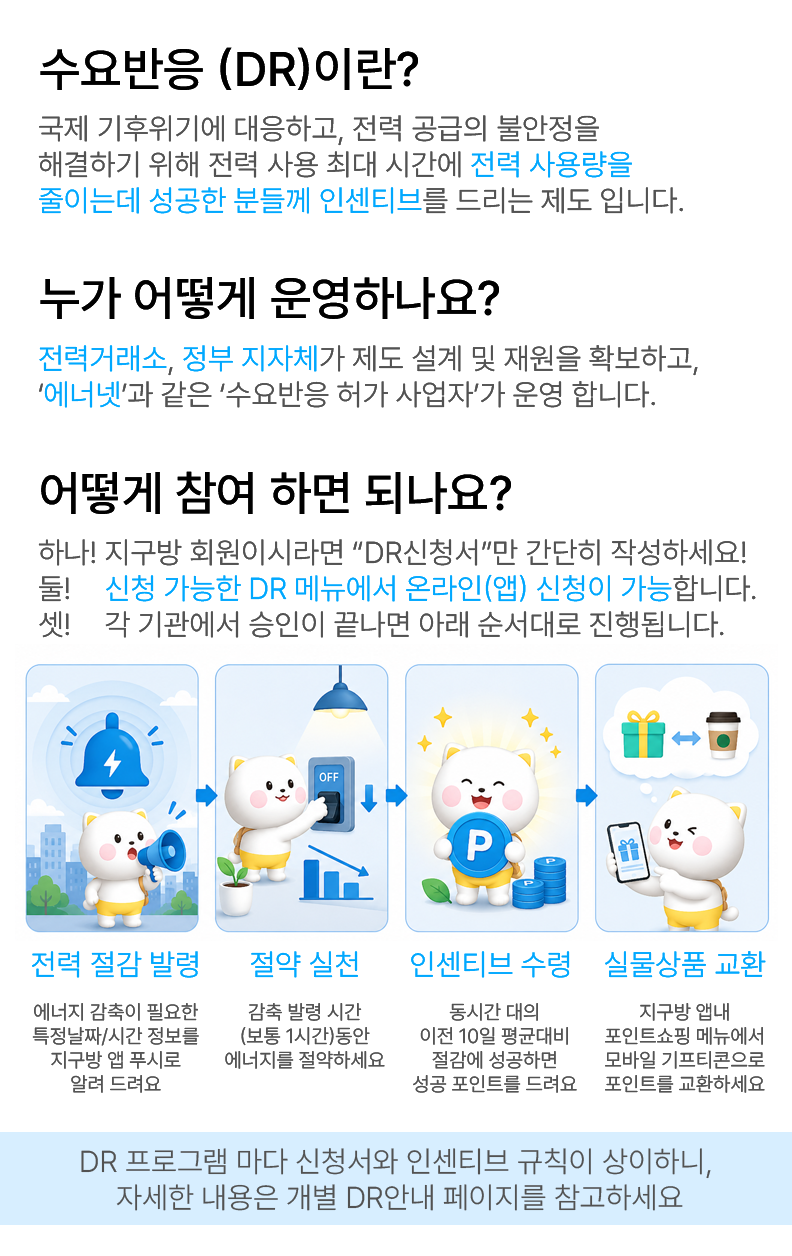
<style>
.page{position:relative;width:792px;height:1256px;background:#ffffff}
.page>*{position:absolute;margin:0}
.t1{font:48px "Pretendard-Medium";color:#000000;text-transform:uppercase}
.t2{font:30px "Pretendard-Light";color:#525252;text-transform:uppercase}
.t3{font:30px "Pretendard-Light";color:#00a8ff;text-transform:uppercase}
.t4{font:30px "Pretendard-Light";color:#ffffff;text-transform:uppercase}
.t5{font:20px "Pretendard-Light";color:#525252;text-transform:uppercase}
</style>
<div class="page">
<p class="t1" style="left:40px;top:47px;width:378px;height:43px">수요반응 (DR)이란?</p>
<p class="t1" style="left:40px;top:47px;width:378px;height:43px">수요반응 (DR)이란?</p>
<p class="t2" style="left:38px;top:115px;width:645px;height:99px">국제 기후위기에 대응하고, 전력 공급의 불안정을<br>해결하기 위해 전력 사용 최대 시간에 <span class="t3">전력 사용량을<br>줄이는데 성공한 분들께 인센티브</span>를 드리는 제도 입니다.</p>
<p class="t2" style="left:38px;top:115px;width:645px;height:99px">국제 기후위기에 대응하고, 전력 공급의 불안정을<br>해결하기 위해 전력 사용 최대 시간에 <span class="t3">전력 사용량을<br>줄이는데 성공한 분들께 인센티브</span>를 드리는 제도 입니다.</p>
<p class="t1" style="left:40px;top:277px;width:459px;height:42px">누가 어떻게 운영하나요?</p>
<p class="t1" style="left:40px;top:277px;width:459px;height:42px">누가 어떻게 운영하나요?</p>
<p class="t2" style="left:39px;top:345px;width:659px;height:63px"><span class="t3">전력거래소</span>, <span class="t3">정부 지자체</span>가 제도 설계 및 재원을 확보하고,<br>‘<span class="t3">에너넷</span>’과 같은 ‘수요반응 허가 사업자’가 운영 합니다.</p>
<p class="t2" style="left:39px;top:345px;width:659px;height:63px"><span class="t3">전력거래소</span>, <span class="t3">정부 지자체</span>가 제도 설계 및 재원을 확보하고,<br>‘<span class="t3">에너넷</span>’과 같은 ‘수요반응 허가 사업자’가 운영 합니다.</p>
<p class="t1" style="left:41px;top:471px;width:470px;height:43px">어떻게 참여 하면 되나요?</p>
<p class="t1" style="left:41px;top:471px;width:470px;height:43px">어떻게 참여 하면 되나요?</p>
<p class="t2" style="left:38px;top:539px;width:718px;height:99px">하나! 지구방 회원이시라면 “DR신청서”만 간단히 작성하세요! <br>둘! <span class="t4">둘</span><span class="t3">신청 가능한 DR 메뉴에서 온라인(앱) 신청이 가능</span>합니다.<br>셋! <span class="t4">셋</span>각 기관에서 승인이 끝나면 아래 순서대로 진행됩니다.</p>
<p class="t2" style="left:38px;top:539px;width:718px;height:99px">하나! 지구방 회원이시라면 “DR신청서”만 간단히 작성하세요! <br>둘! <span class="t4">둘</span><span class="t3">신청 가능한 DR 메뉴에서 온라인(앱) 신청이 가능</span>합니다.<br>셋! <span class="t4">셋</span>각 기관에서 승인이 끝나면 아래 순서대로 진행됩니다.</p>
<p class="t3" style="left:32px;top:951px;width:166px;height:27px">전력 절감 발령</p>
<p class="t3" style="left:32px;top:951px;width:166px;height:27px">전력 절감 발령</p>
<p class="t3" style="left:251px;top:951px;width:107px;height:27px">절약 실천</p>
<p class="t3" style="left:251px;top:951px;width:107px;height:27px">절약 실천</p>
<p class="t3" style="left:411px;top:951px;width:159px;height:27px">인센티브 수령</p>
<p class="t3" style="left:411px;top:951px;width:159px;height:27px">인센티브 수령</p>
<p class="t3" style="left:605px;top:951px;width:161px;height:27px">실물상품 교환</p>
<p class="t3" style="left:605px;top:951px;width:161px;height:27px">실물상품 교환</p>
<p class="t5" style="left:32px;top:1003px;width:167px;height:90px;text-align:center">에너지 감축이 필요한<br>특정날짜/시간 정보를<br>지구방 앱 푸시로<br>알려 드려요</p>
<p class="t5" style="left:32px;top:1003px;width:167px;height:90px;text-align:center">에너지 감축이 필요한<br>특정날짜/시간 정보를<br>지구방 앱 푸시로<br>알려 드려요</p>
<p class="t5" style="left:225px;top:1003px;width:160px;height:66px;text-align:center">감축 발령 시간<br>(보통 1시간)동안<br>에너지를 절약하세요</p>
<p class="t5" style="left:225px;top:1003px;width:160px;height:66px;text-align:center">감축 발령 시간<br>(보통 1시간)동안<br>에너지를 절약하세요</p>
<p class="t5" style="left:413px;top:1003px;width:164px;height:90px;text-align:center">동시간 대의<br>이전 10일 평균대비<br>절감에 성공하면<br>성공 포인트를 드려요</p>
<p class="t5" style="left:413px;top:1003px;width:164px;height:90px;text-align:center">동시간 대의<br>이전 10일 평균대비<br>절감에 성공하면<br>성공 포인트를 드려요</p>
<p class="t5" style="left:605px;top:1003px;width:160px;height:90px;text-align:center">지구방 앱내<br>포인트쇼핑 메뉴에서<br>모바일 기프티콘으로<br>포인트를 교환하세요</p>
<p class="t5" style="left:605px;top:1003px;width:160px;height:90px;text-align:center">지구방 앱내<br>포인트쇼핑 메뉴에서<br>모바일 기프티콘으로<br>포인트를 교환하세요</p>
<p class="t2" style="left:81px;top:1148px;width:630px;height:63px;text-align:center">DR 프로그램 마다 신청서와 인센티브 규칙이 상이하니, <br>자세한 내용은 개별 DR안내 페이지를 참고하세요</p>
<p class="t2" style="left:81px;top:1148px;width:630px;height:63px;text-align:center">DR 프로그램 마다 신청서와 인센티브 규칙이 상이하니, <br>자세한 내용은 개별 DR안내 페이지를 참고하세요</p>
</div>
